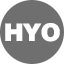
<style>
.page{position:relative;width:64px;height:64px;background:#6f6f6f}
.page>*{position:absolute;margin:0}
.t1{font:24.4px "Helvetica-Black";letter-spacing:-0.05em;color:#ffffff;text-transform:uppercase}
</style>
<div class="page">
<p class="t1" style="left:5px;top:23px;width:55px;height:19px">hyo</p>
</div>
